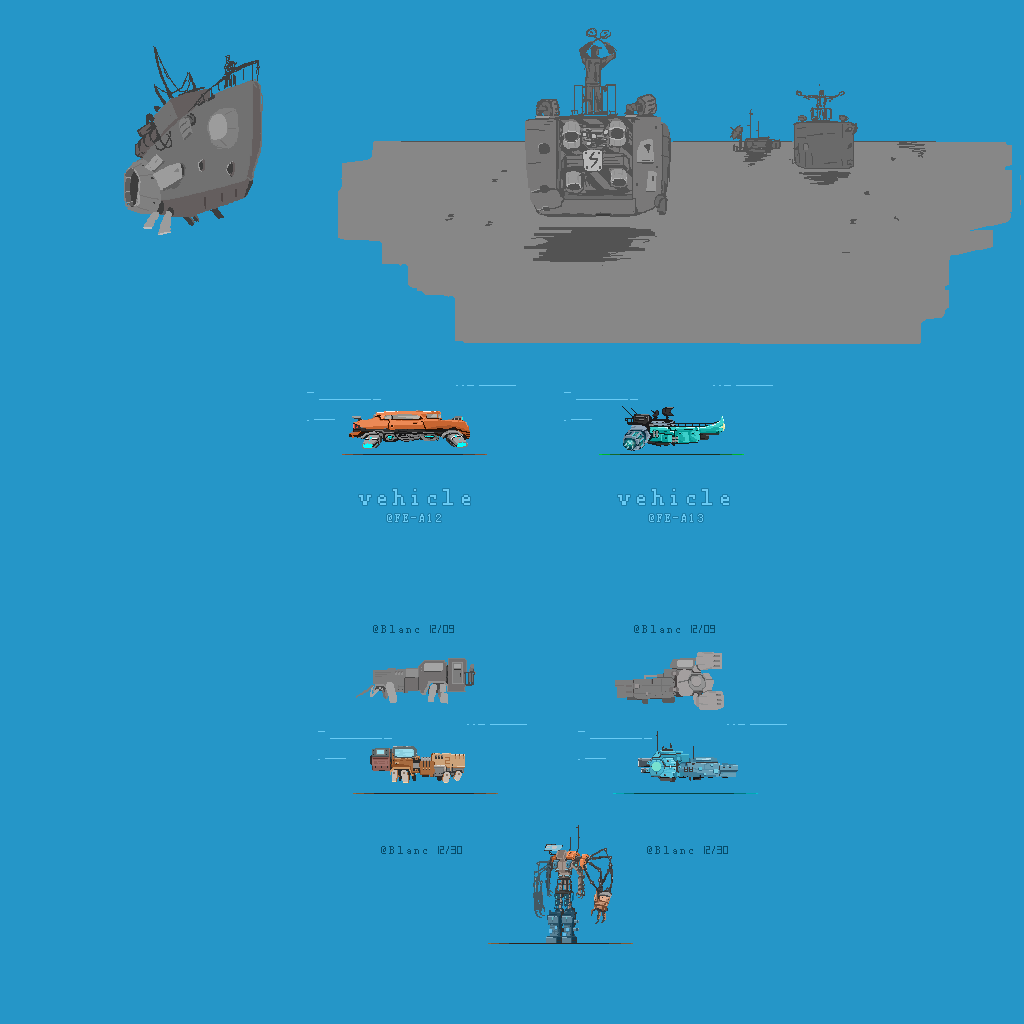
<style>
.page{position:relative;width:1024px;height:1024px;background:#2596c8}
.page>*{position:absolute;margin:0}
.t1{font:24px "FZXS12--GB1-0";letter-spacing:0.2em;color:#69cbf5}
.t2{font:10.7px "FZXS12--GB1-0";letter-spacing:0.2em;color:#69cbf5}
.t3{font:10.7px "FZXS12--GB1-0";letter-spacing:0.2em;color:#064b69}
</style>
<div class="page">
<p class="t1" style="left:359px;top:489px;width:111px;height:16px">vehicle</p>
<p class="t1" style="left:618px;top:489px;width:111px;height:16px">vehicle</p>
<p class="t2" style="left:387px;top:514px;width:54px;height:8px">@FE-A12</p>
<p class="t2" style="left:649px;top:514px;width:54px;height:8px">@FE-A13</p>
<p class="t3" style="left:373px;top:625px;width:46px;height:8px">@Blanc</p>
<p class="t3" style="left:634px;top:625px;width:46px;height:8px">@Blanc</p>
<p class="t3" style="left:381px;top:846px;width:46px;height:8px">@Blanc</p>
<p class="t3" style="left:647px;top:846px;width:46px;height:8px">@Blanc</p>
</div>
